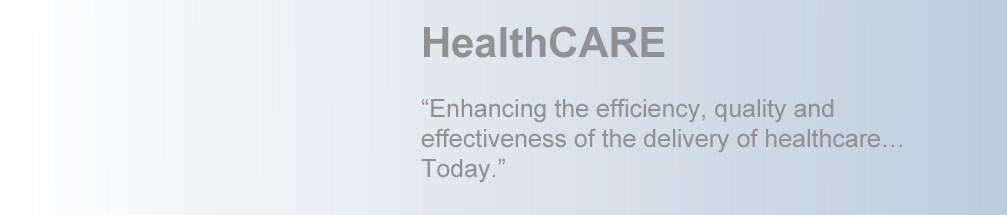
<style>
.page{position:relative;width:1007px;height:215px}
.page>*{position:absolute;margin:0}
.t1{font:25px "ArialMT";color:#919194}
.t2{font:41.7px "Arial-BoldMT";color:#919194}
</style>
<div class="page">
<p class="t1" style="left:421px;top:26px;width:481px;height:157px"><span class="t2">HealthCARE<br><br></span>“Enhancing the efficiency, quality and <br>effectiveness of the delivery of healthcare…<br>Today.”</p>
</div>
